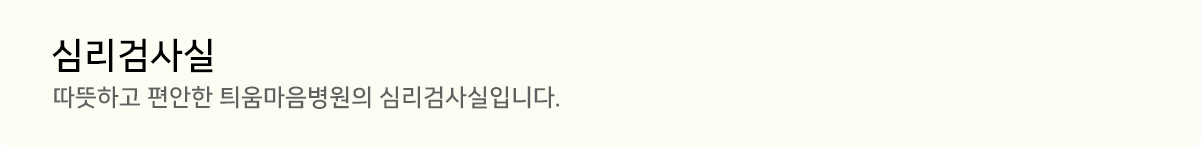
<style>
.page{position:relative;width:1201px;height:147px;background:#fdfcf3}
.page>*{position:absolute;margin:0}
.t1{font:36px "NanumSquareOTFB";letter-spacing:0.005em;color:#000000}
.t2{font:24px "NanumSquareOTFB";letter-spacing:0.005em;color:#606060}
</style>
<div class="page">
<p class="t1" style="left:52px;top:38px;width:161px;height:35px">심리검사실</p>
<p class="t2" style="left:54px;top:86px;width:505px;height:23px">따뜻하고 편안한 틔움마음병원의 심리검사실입니다.</p>
</div>
